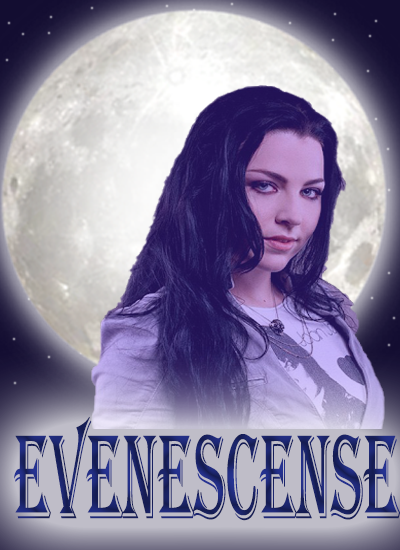
<style>
.page{position:relative;width:400px;height:550px}
.page>*{position:absolute;margin:0}
.t1{font:123.1px "Algerian";color:#1a2366;scale:0.47 1}
</style>
<div class="page">
<p class="t1" style="left:14px;top:416px;width:387px;height:105px">evenescense</p>
</div>
